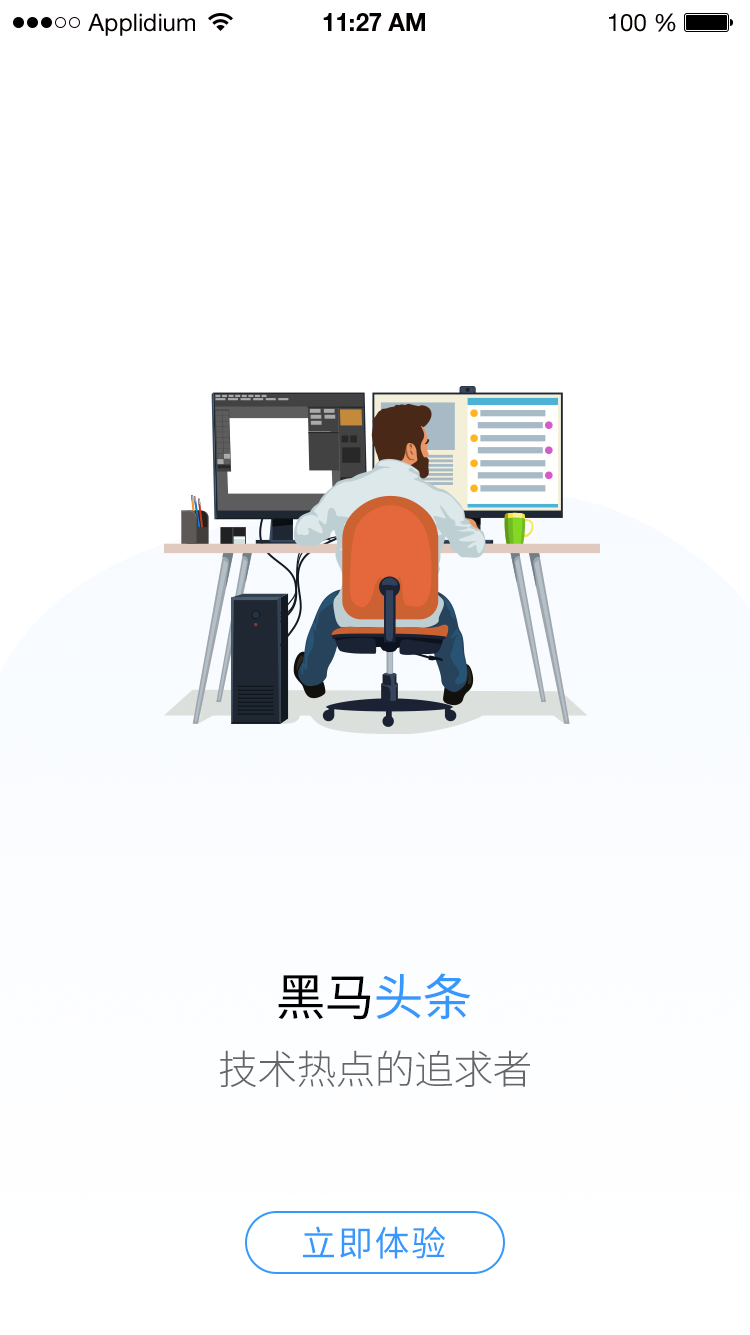
<style>
.page{position:relative;width:750px;height:1335px;background:#ffffff}
.page>*{position:absolute;margin:0}
.t1{font:50px "SourceHanSansCN-Regular";letter-spacing:-0.02em;color:#000000}
.t2{font:50px "SourceHanSansCN-Regular";letter-spacing:-0.02em;color:#3698fa}
.t3{font:40px "SourceHanSansCN-Light";letter-spacing:-0.02em;color:#666666}
.t4{font:35px "SourceHanSansCN-Regular";letter-spacing:0.05em;color:#3698fa}
</style>
<div class="page">
<p class="t1" style="left:278px;top:973px;width:193px;height:47px">黑马<span class="t2">头条</span></p>
<p class="t1" style="left:278px;top:973px;width:193px;height:47px">黑马<span class="t2">头条</span></p>
<p class="t1" style="left:278px;top:973px;width:193px;height:47px">黑马<span class="t2">头条</span></p>
<p class="t3" style="left:219px;top:1050px;width:311px;height:37px">技术热点的追求者</p>
<p class="t4" style="left:303px;top:1226px;width:143px;height:33px">立即体验</p>
</div>
